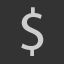
<style>
.page{position:relative;width:64px;height:64px;background:#333333}
.page>*{position:absolute;margin:0}
.t1{font:60px "MyriadHebrew-Regular";color:#cdcdcd}
</style>
<div class="page">
<p class="t1" style="left:21px;top:7px;width:23px;height:49px">$</p>
</div>
